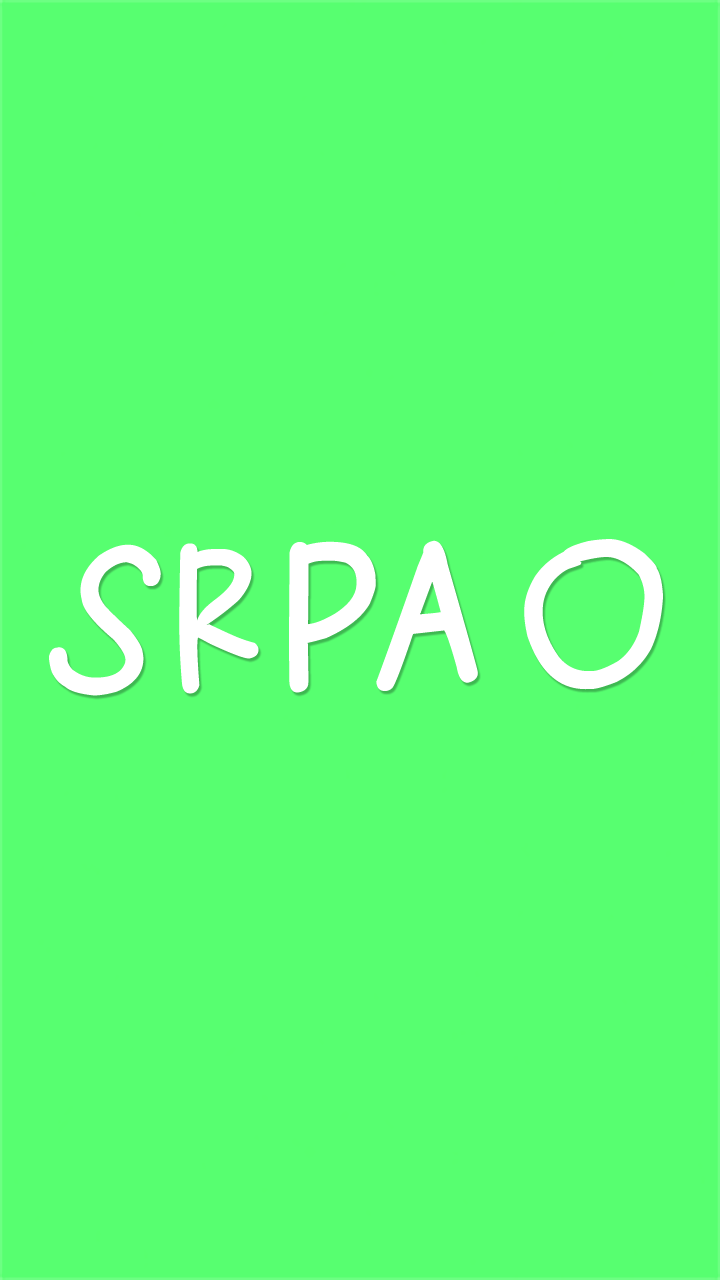
<style>
.page{position:relative;width:720px;height:1280px;background:#57ff70}
.page>*{position:absolute;margin:0}
.t1{font:177.4px "CeesHand";color:#ffffff;text-transform:uppercase;font-weight:bold}
</style>
<div class="page">
<p class="t1" style="left:49px;top:539px;width:614px;height:157px;rotate:-1deg">Srpao</p>
</div>
